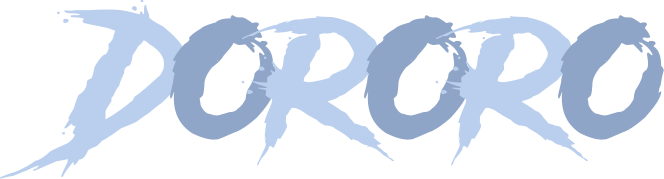
<style>
.page{position:relative;width:664px;height:179px;background:#ffffff}
.page>*{position:absolute;margin:0}
.t1{font:144px "AnotherDangerDemo";color:#bacfed;scale:1.2 1}
.t2{font:144px "AnotherDangerDemo";color:#8fa6c8;scale:1.2 1}
.t3{font:144px "AnotherDangerDemo";color:#8ea5c7;scale:1.2 1}
</style>
<div class="page">
<p class="t1" style="left:0px;top:0px;width:664px;height:179px">D<span class="t2">O</span>R<span class="t3">O</span>R<span class="t3">O</span></p>
</div>
